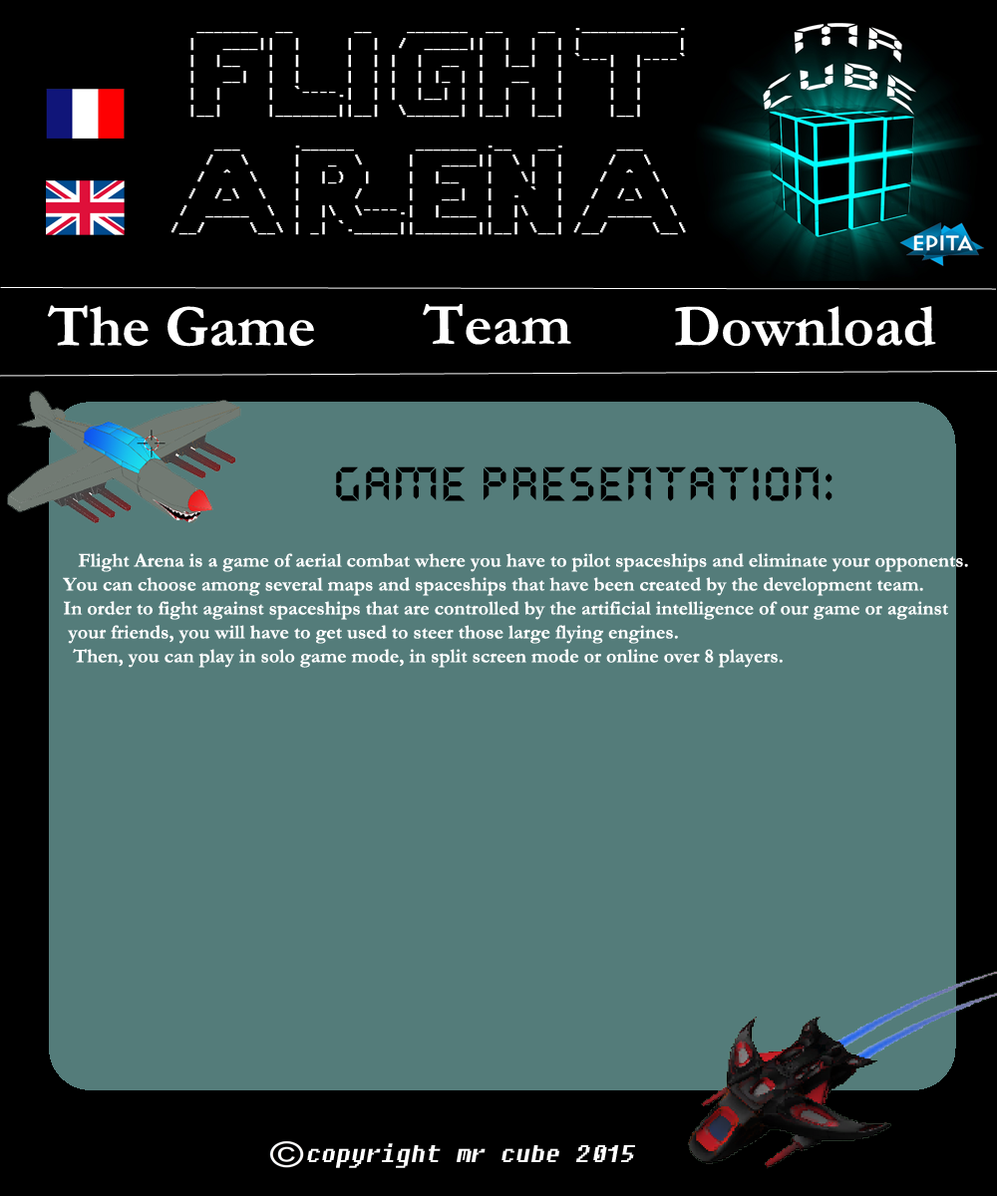
<style>
.page{position:relative;width:997px;height:1196px;background:#547c7a}
.page>*{position:absolute;margin:0}
.t1{font:14px "Fixedsys";color:#ffffff;font-weight:bold}
.t2{font:59.8px "Garamond-Bold";color:#ffffff}
.t3{font:47.8px "QuartzMS";color:#000000}
.t4{font:19.9px "Garamond-Bold";color:#ffffff}
.t5{font:23.9px "Fixedsys";color:#ffffff;font-style:italic}
</style>
<div class="page">
<p class="t1" style="left:171px;top:28px;width:515px;height:207px">_______  __       __    _______  __    __  .___________.<br>  |   ____||  |     |  |  /  _____||  |  |  | |           |<br>  |  |__   |  |     |  | |  |  __  |  |__|  | `---|  |----`<br>  |   __|  |  |     |  | |  | |_ | |   __   |     |  |     <br>  |  |     |  `----.|  | |  |__| | |  |  |  |     |  |     <br>  |__|     |_______||__|  \______| |__|  |__|     |__|     <br>                                                         <br>     ___      .______       _______ .__   __.      ___      <br>    /   \     |   _  \     |   ____||  \ |  |     /   \     <br>   /  ^  \    |  |_)  |    |  |__   |   \|  |    /  ^  \    <br>  /  /_\  \   |      /     |   __|  |  . `  |   /  /_\  \   <br> /  _____  \  |  |\  \----.|  |____ |  |\   |  /  _____  \  <br>/__/     \__\ | _| `._____||_______||__| \__| /__/     \__\</p>
<p class="t2" style="left:47px;top:305px;width:267px;height:42px">The Game</p>
<p class="t2" style="left:423px;top:304px;width:148px;height:41px">Team</p>
<p class="t2" style="left:675px;top:306px;width:261px;height:41px">Download</p>
<p class="t3" style="left:336px;top:467px;width:496px;height:34px">Game presentation:</p>
<p class="t4" style="left:63px;top:553px;width:905px;height:115px">Flight Arena is a game of aerial combat where you have to pilot spaceships and eliminate your opponents. <br>You can choose among several maps and spaceships that have been created by the development team. <br>In order to fight against spaceships that are controlled by the artificial intelligence of our game or against<br> your friends, you will have to get used to steer those large flying engines. <br>  Then, you can play in solo game mode, in split screen mode or online over 8 players.</p>
<p class="t5" style="left:307px;top:1143px;width:328px;height:25px">copyright mr cube 2015</p>
</div>
